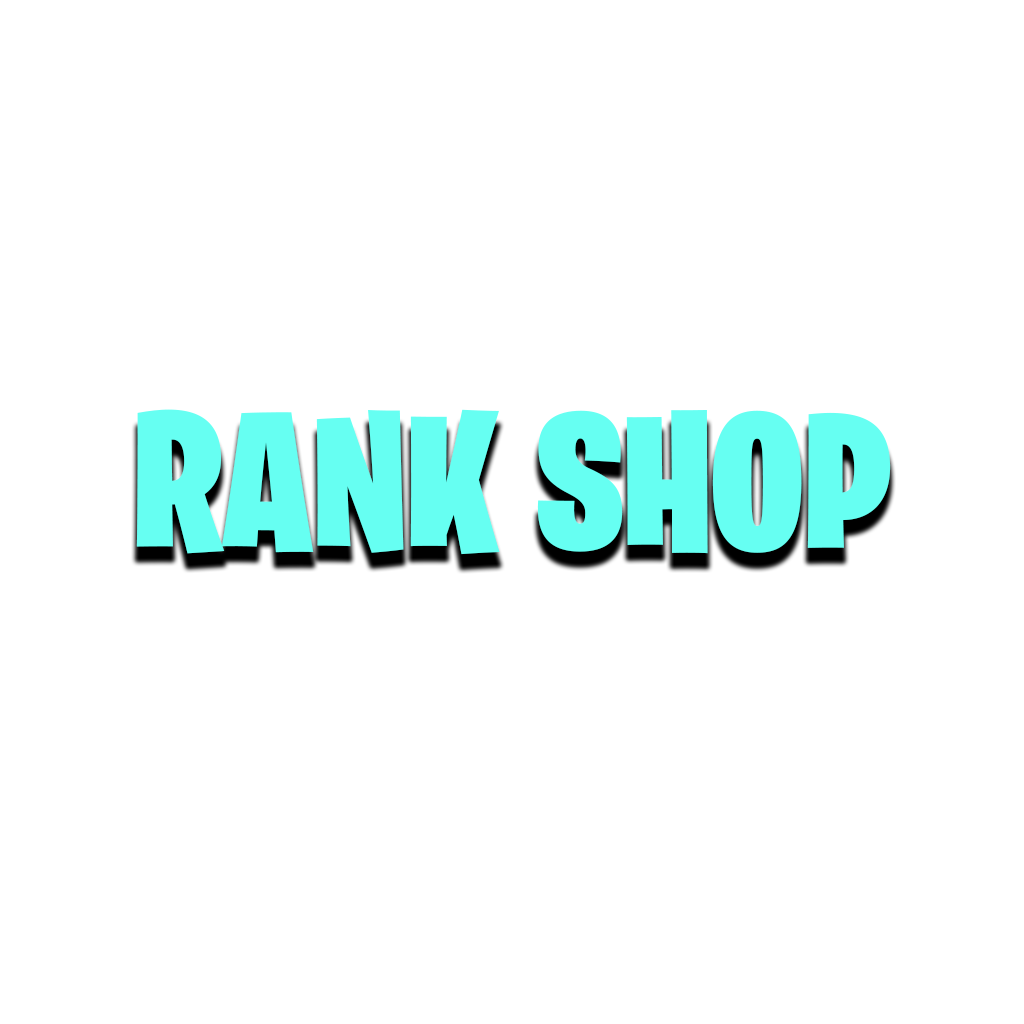
<style>
.page{position:relative;width:1024px;height:1024px;background:#ffffff}
.page>*{position:absolute;margin:0}
.t1{font:194.7px "BurbankBigCondensed-Black";color:#66fff2}
</style>
<div class="page">
<p class="t1" style="left:136px;top:409px;width:755px;height:146px">RANK SHOP</p>
</div>
